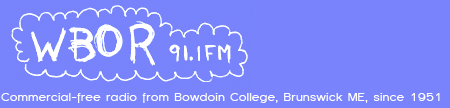
<style>
.page{position:relative;width:450px;height:108px;background:#7883fc}
.page>*{position:absolute;margin:0}
.t1{font:12px "Florencesans";color:#ffffff}
</style>
<div class="page">
<p class="t1" style="left:1px;top:93px;width:439px;height:10px">Commercial-free radio from Bowdoin College, Brunswick ME, since 1951</p>
</div>
